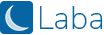
<style>
.page{position:relative;width:104px;height:35px;background:#ffffff}
.page>*{position:absolute;margin:0}
.t1{font:32px "NunitoSans-ExtraLight";color:#0765a3}
</style>
<div class="page">
<p class="t1" style="left:40px;top:6px;width:63px;height:23px">Laba</p>
</div>
